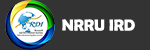
<style>
.page{position:relative;width:150px;height:50px;background:#333333}
.page>*{position:absolute;margin:0}
.t1{font:16px "BerlinSansFBDemi-Bold";color:#ffffff}
</style>
<div class="page">
<p class="t1" style="left:62px;top:19px;width:73px;height:12px">NRRU IRD</p>
</div>
